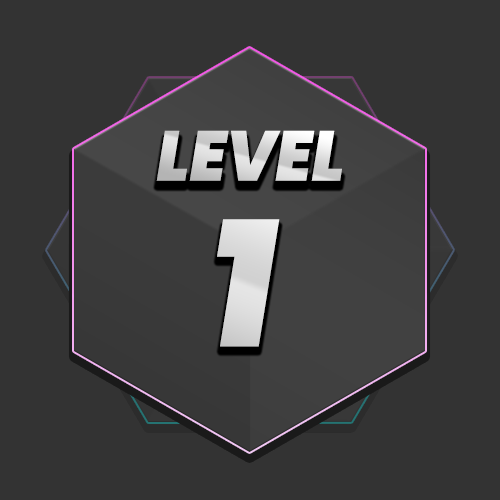
<style>
.page{position:relative;width:500px;height:500px;background:#333333}
.page>*{position:absolute;margin:0}
.t1{font:70.7px "Poppins-BlackItalic";color:#d6d6d6;scale:0.92 1}
.t2{font:179.6px "Poppins-BlackItalic";color:#dbdbdb;scale:0.92 1}
</style>
<div class="page">
<p class="t1" style="left:156px;top:130px;width:186px;height:51px">LEVEL</p>
<p class="t2" style="left:217px;top:219px;width:63px;height:128px">1</p>
</div>
